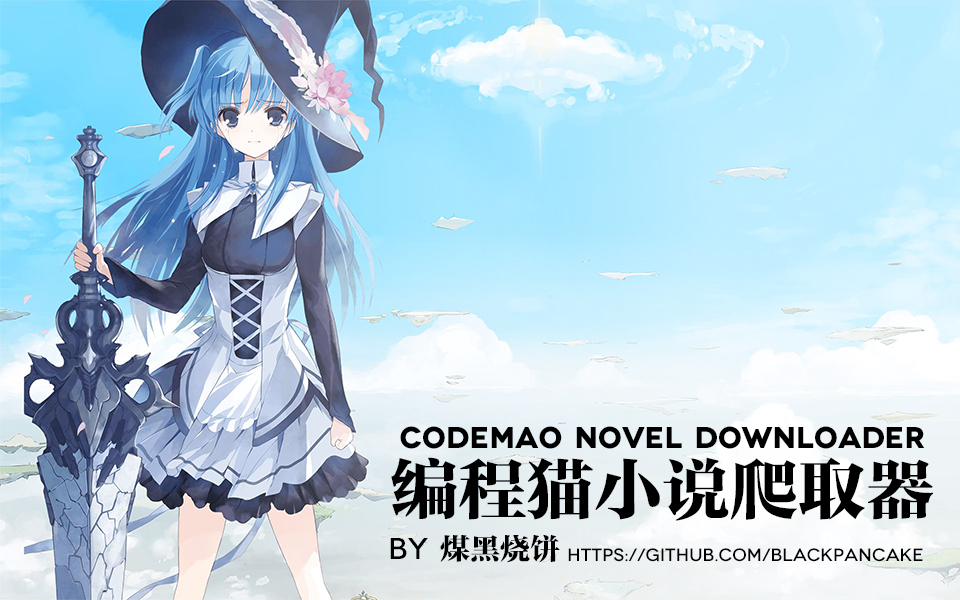
<style>
.page{position:relative;width:960px;height:600px}
.page>*{position:absolute;margin:0}
.t1{font:30px "Novecentowide-Bold";color:#000000}
.t2{font:68px "FZTYSJW--GB1-0";color:#000000}
.t3{font:30px "FZTYSJW--GB1-0";color:#000000}
.t4{font:30px "Novecentowide-Medium";color:#000000}
.t5{font:18px "Novecentowide-Medium";color:#000000}
</style>
<div class="page">
<p class="t1" style="left:400px;top:426px;width:525px;height:23px">codemao novel downloader</p>
<p class="t2" style="left:391px;top:457px;width:543px;height:64px">编程猫小说爬取器</p>
<p class="t3" style="left:390px;top:534px;width:170px;height:29px"><span class="t4">By </span>煤黑烧饼</p>
<p class="t5" style="left:568px;top:548px;width:355px;height:14px">https://github.com/blackpancake</p>
</div>
